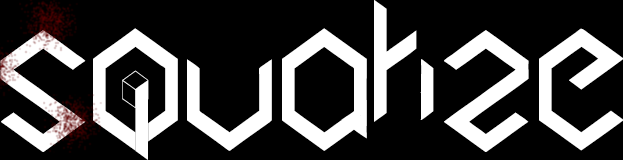
<style>
.page{position:relative;width:623px;height:160px;background:#000000}
.page>*{position:absolute;margin:0}
.t1{font:144px "Cubic";color:#ffffff;scale:0.8 1}
</style>
<div class="page">
<p class="t1" style="left:0px;top:0px;width:624px;height:160px">squarize</p>
</div>
